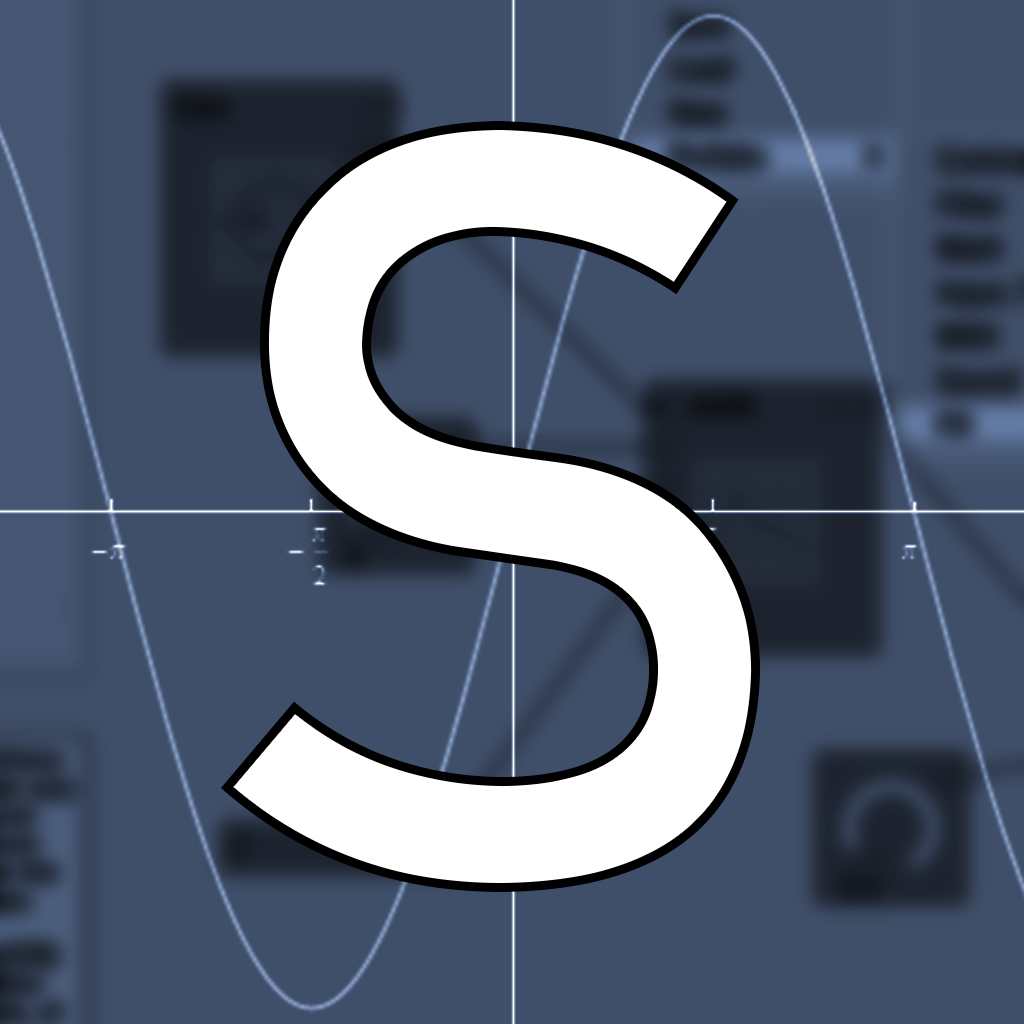
<style>
.page{position:relative;width:1024px;height:1024px;background:#404f69}
.page>*{position:absolute;margin:0}
.t1{font:1066.2px "DINAlternate-Bold";color:#ffffff}
</style>
<div class="page">
<p class="t1" style="left:220px;top:121px;width:541px;height:771px">S</p>
</div>
